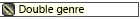
<style>
.page{position:relative;width:140px;height:19px;background:#ffffff}
.page>*{position:absolute;margin:0}
.t1{font:10.9px "LaoUI";color:#000000}
</style>
<div class="page">
<p class="t1" style="left:19px;top:5px;width:65px;height:10px">Double genre</p>
</div>
